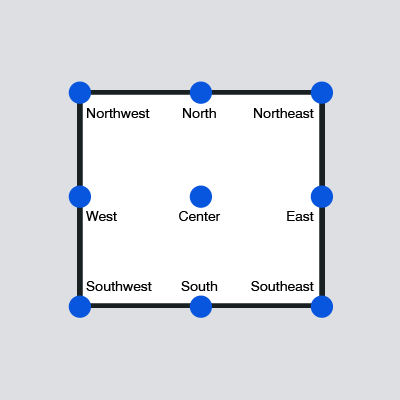
<style>
.page{position:relative;width:400px;height:400px;background:#dedfe3}
.page>*{position:absolute;margin:0}
.t1{font:13.9px "Swiss721BT-Roman";color:#000000}
</style>
<div class="page">
<p class="t1" style="left:87px;top:108px;width:63px;height:10px">Northwest</p>
<p class="t1" style="left:183px;top:108px;width:33px;height:10px">North</p>
<p class="t1" style="left:254px;top:108px;width:60px;height:10px">Northeast</p>
<p class="t1" style="left:86px;top:211px;width:31px;height:10px">West</p>
<p class="t1" style="left:179px;top:211px;width:42px;height:10px">Center</p>
<p class="t1" style="left:287px;top:211px;width:27px;height:10px">East</p>
<p class="t1" style="left:86px;top:281px;width:66px;height:10px">Southwest</p>
<p class="t1" style="left:181px;top:281px;width:37px;height:10px">South</p>
<p class="t1" style="left:251px;top:281px;width:63px;height:10px">Southeast</p>
</div>
